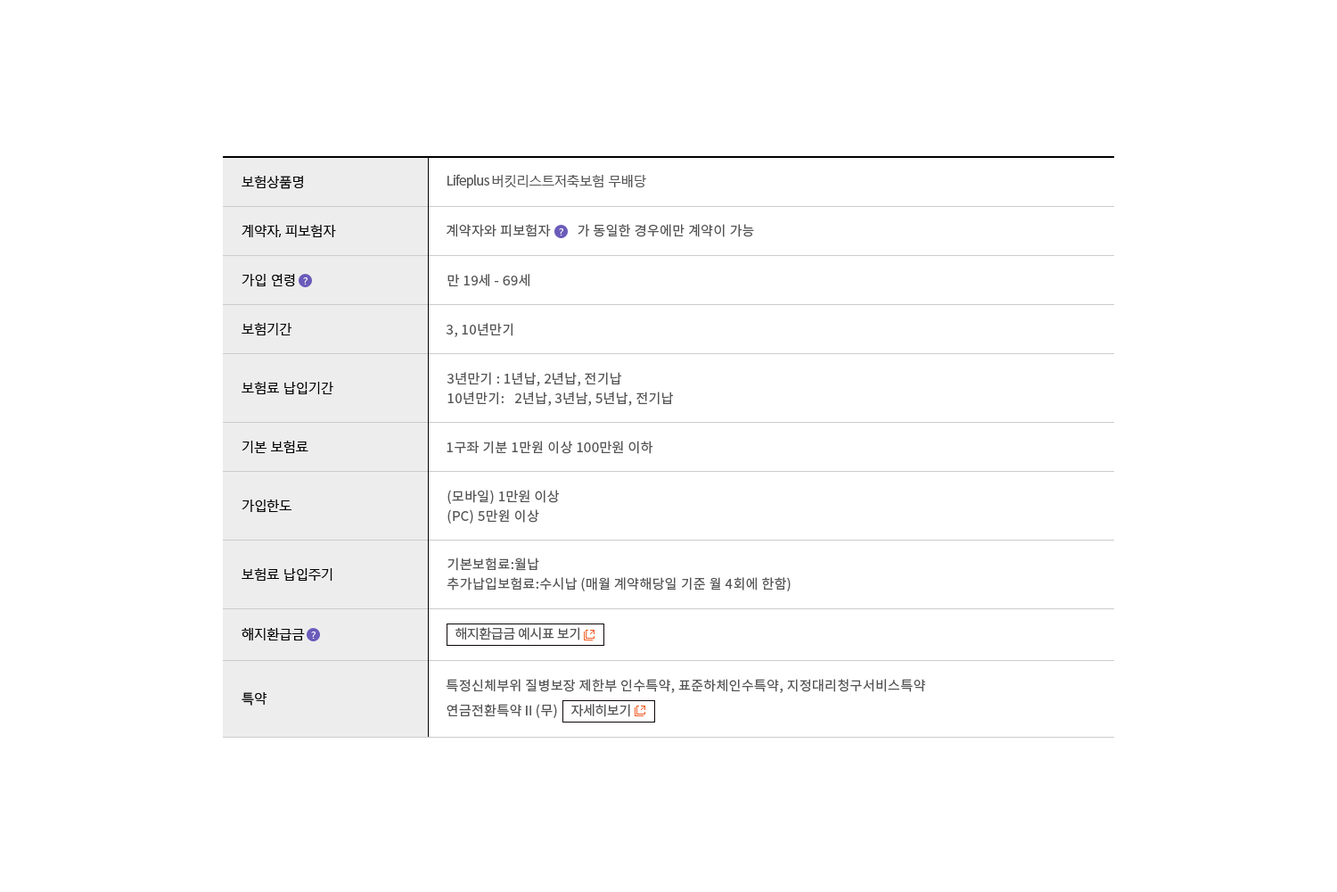
<style>
.page{position:relative;width:1337px;height:892px;background:#ffffff}
.page>*{position:absolute;margin:0}
.t1{font:13.4px "MalgunGothicRegular";letter-spacing:-0.06em;color:#555555}
.t2{font:13.4px "NotoSansKR-Regular";letter-spacing:-0.06em;color:#555555}
.t3{font:13.4px "MalgunGothicRegular";letter-spacing:-0.06em;color:#000000}
.t4{font:13.4px "NotoSansKR-Regular";letter-spacing:0.025em;color:#555555}
.t5{font:10.2px "MalgunGothicRegular";letter-spacing:-0.06em;color:#ffffff;scale:1.07 1}
.t6{font:13.4px/19.6px "NotoSansKR-Regular";letter-spacing:0.025em;color:#555555}
.t7{font:13.4px "NotoSansKR-Regular";letter-spacing:-0.02em;color:#555555}
.t8{font:13.4px/25px "NotoSansKR-Regular";letter-spacing:0.025em;color:#555555}
</style>
<div class="page">
<p class="t1" style="left:448px;top:174px;width:198px;height:14px"><span class="t2">Lifeplus </span>버킷리스트저축보험 무배당</p>
<p class="t3" style="left:242px;top:176px;width:61px;height:13px">보험상품명</p>
<p class="t3" style="left:242px;top:225px;width:94px;height:12px">계약자, 피보험자</p>
<p class="t4" style="left:447px;top:224px;width:307px;height:13px">계약자와 피보험자        가 동일한 경우에만 계약이 가능</p>
<p class="t5" style="left:559px;top:228px;width:4px;height:7px">?</p>
<p class="t3" style="left:242px;top:274px;width:53px;height:12px">가입 연령</p>
<p class="t5" style="left:303px;top:277px;width:5px;height:7px">?</p>
<p class="t4" style="left:448px;top:274px;width:82px;height:12px">만 19세 - 69세</p>
<p class="t3" style="left:242px;top:323px;width:50px;height:12px">보험기간</p>
<p class="t4" style="left:446px;top:323px;width:67px;height:14px">3, 10년만기</p>
<p class="t6" style="left:447px;top:372px;width:226px;height:34px">3년만기 : 1년납, 2년납, 전기납<br>10년만기:   2년납, 3년남, 5년납, 전기납</p>
<p class="t3" style="left:242px;top:382px;width:91px;height:12px">보험료 납입기간</p>
<p class="t3" style="left:242px;top:440px;width:66px;height:13px">기본 보험료</p>
<p class="t4" style="left:447px;top:440px;width:207px;height:14px">1구좌 기분 1만원 이상 100만원 이하</p>
<p class="t6" style="left:448px;top:489px;width:111px;height:34px">(모바일) 1만원 이상<br>(PC) 5만원 이상</p>
<p class="t3" style="left:242px;top:499px;width:50px;height:13px">가입한도</p>
<p class="t6" style="left:448px;top:557px;width:343px;height:34px">기본보험료:월납<br>추가납입보험료:수시납 (매월 계약해당일 기준 월 4회에 한함)</p>
<p class="t3" style="left:242px;top:568px;width:91px;height:12px">보험료 납입주기</p>
<p class="t3" style="left:242px;top:628px;width:63px;height:12px">해지환급금</p>
<p class="t7" style="left:456px;top:627px;width:124px;height:13px">해지환급금 예시표 보기</p>
<p class="t5" style="left:311px;top:631px;width:5px;height:7px">?</p>
<p class="t8" style="left:446px;top:679px;width:479px;height:39px">특정신체부위 질병보장 제한부 인수특약, 표준하체인수특약, 지정대리청구서비스특약<br>연금전환특약Ⅱ(무)</p>
<p class="t3" style="left:242px;top:692px;width:25px;height:13px">특약</p>
<p class="t7" style="left:572px;top:703px;width:58px;height:14px">자세히보기</p>
</div>
